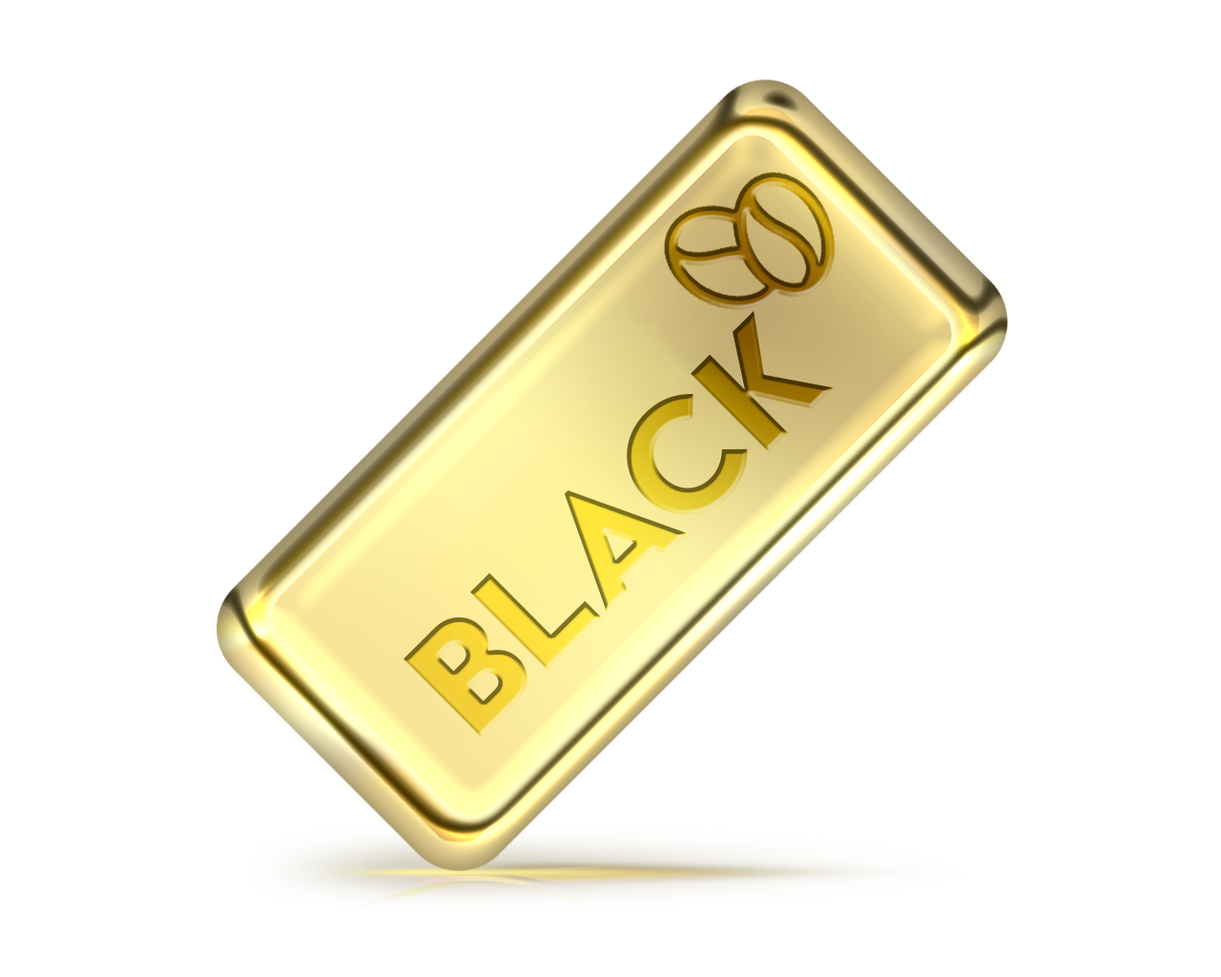
<style>
.page{position:relative;width:1221px;height:977px;background:#ffffff}
.page>*{position:absolute;margin:0}
.t1{font:183.7px "AcierBATText-Solid"}
</style>
<div class="page">
<p class="t1" style="left:403px;top:310px;width:431px;height:427px;rotate:-45deg">BLACK</p>
</div>
